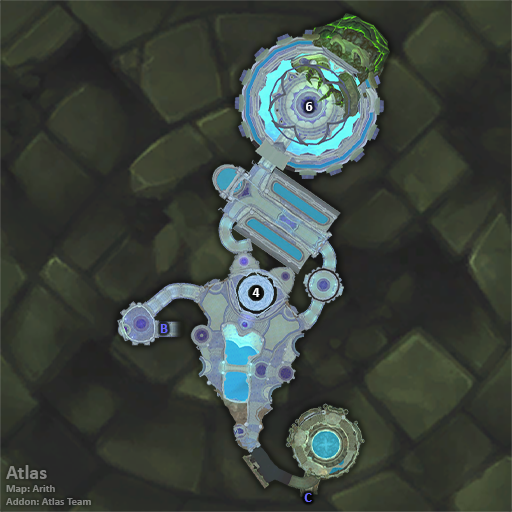
<style>
.page{position:relative;width:512px;height:512px}
.page>*{position:absolute;margin:0}
.t1{font:14px "Calibri-Bold";color:#ffffff}
.t2{font:14px "Calibri-Bold";color:#6666ff}
.t3{font:11px "Calibri-Bold";color:#848682}
.t4{font:20px "Calibri-Bold";color:#848682}
</style>
<div class="page">
<p class="t1" style="left:306px;top:102px;width:7px;height:9px">6</p>
<p class="t1" style="left:252px;top:288px;width:8px;height:9px">4</p>
<p class="t2" style="left:160px;top:324px;width:8px;height:9px">B</p>
<p class="t3" style="left:6px;top:465px;width:85px;height:40px"><span class="t4">Atlas<br></span>Map: Arith<br>Addon: Atlas Team</p>
<p class="t2" style="left:304px;top:493px;width:8px;height:9px">C</p>
</div>
